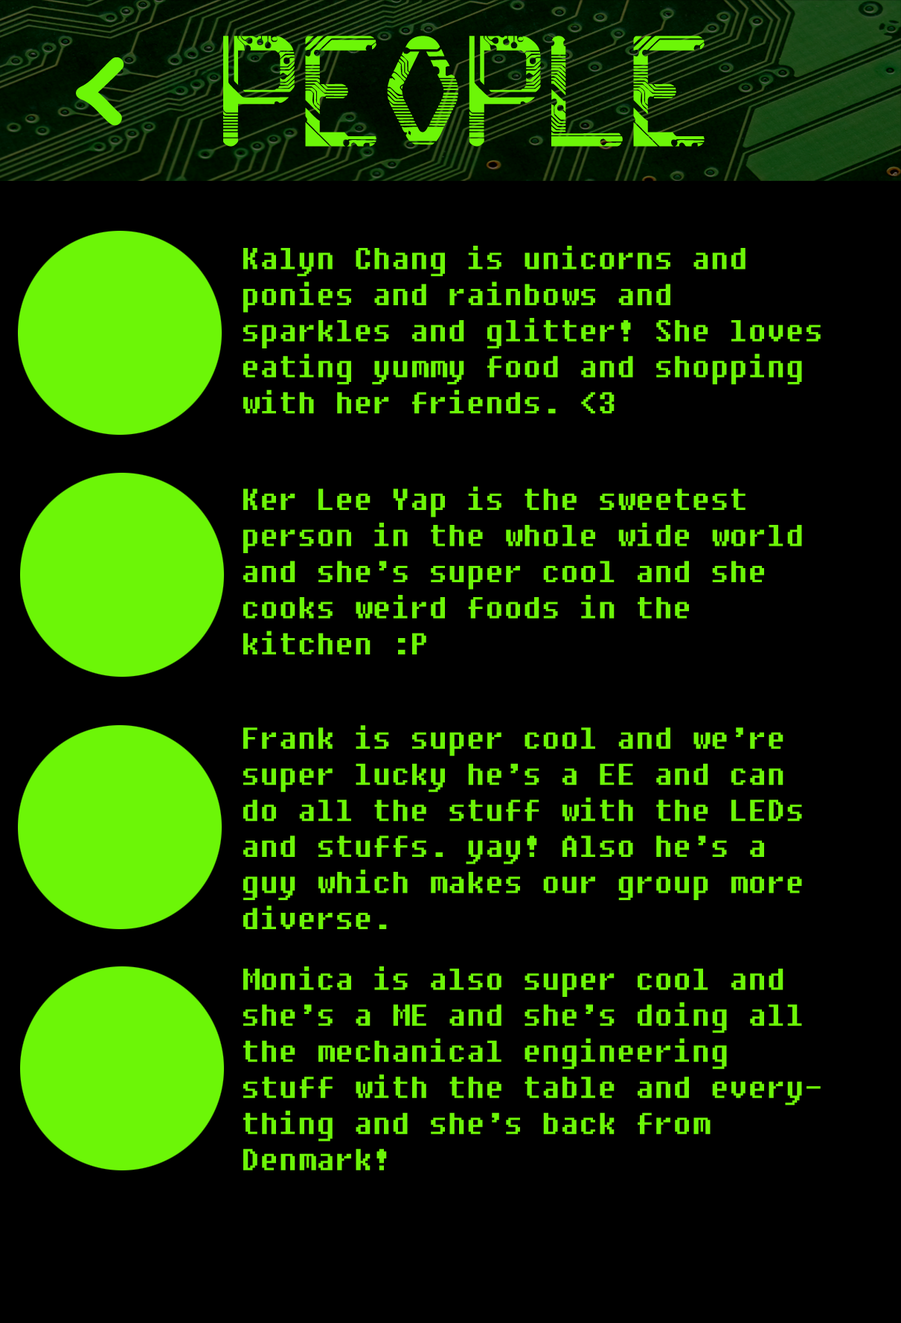
<style>
.page{position:relative;width:901px;height:1323px;background:#000000}
.page>*{position:absolute;margin:0}
.t1{font:160.3px "Circuit";color:#6cf607}
.t2{font:30.1px "Fixedsys";color:#6cf607}
</style>
<div class="page">
<p class="t1" style="left:223px;top:36px;width:482px;height:111px">people</p>
<p class="t2" style="left:243px;top:246px;width:578px;height:168px">Kalyn Chang is unicorns and ponies and rainbows and sparkles and glitter! She loves eating yummy food and shopping with her friends. &lt;3</p>
<p class="t2" style="left:243px;top:486px;width:559px;height:168px">Ker Lee Yap is the sweetest person in the whole wide world and she’s super cool and she cooks weird foods in the kitchen :P</p>
<p class="t2" style="left:243px;top:725px;width:559px;height:204px">Frank is super cool and we’re super lucky he’s a EE and can do all the stuff with the LEDs and stuffs. yay! Also he’s a guy which makes our group more diverse.</p>
<p class="t2" style="left:243px;top:966px;width:578px;height:204px">Monica is also super cool and she’s a ME and she’s doing all the mechanical engineering stuff with the table and everything and she’s back from Denmark!</p>
</div>
